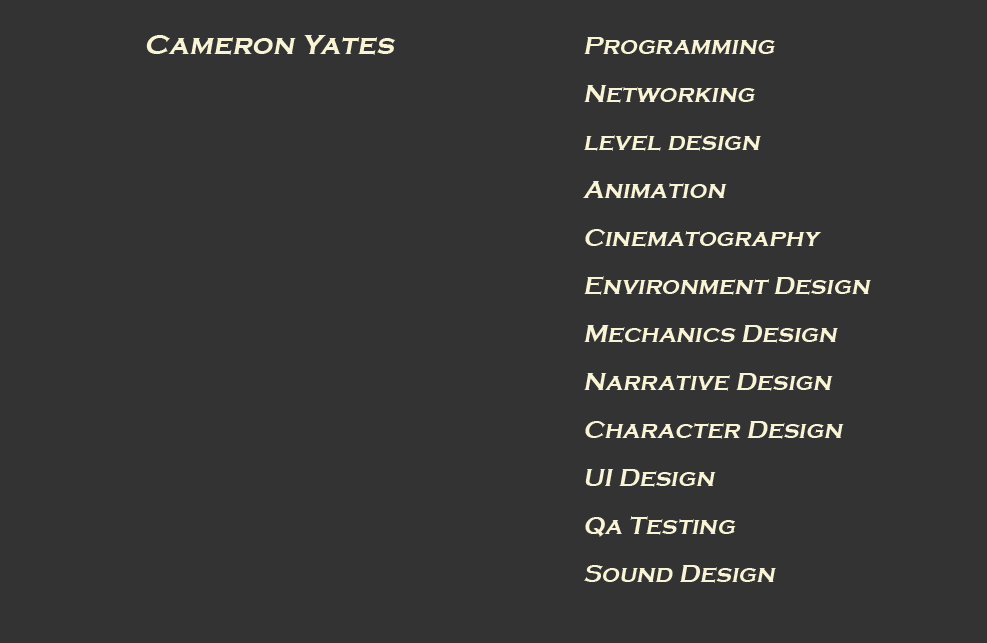
<style>
.page{position:relative;width:987px;height:643px;background:#333333}
.page>*{position:absolute;margin:0}
.t1{font:29.3px "CopperplateGothic-Bold";color:#f9f4d6;font-style:italic}
.t2{font:25px/48px "CopperplateGothic-Bold";color:#f9f4d6;font-style:italic}
</style>
<div class="page">
<p class="t1" style="left:146px;top:35px;width:249px;height:20px">Cameron Yates</p>
<p class="t2" style="left:583px;top:37px;width:288px;height:546px">Programming<br>Networking<br>level design<br>Animation<br>Cinematography<br>Environment Design<br>Mechanics Design<br>Narrative Design<br>Character Design<br>UI Design<br>Qa Testing<br>Sound Design</p>
</div>
